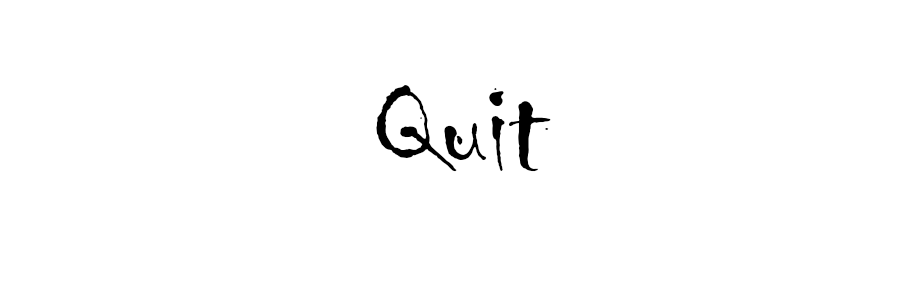
<style>
.page{position:relative;width:921px;height:285px;background:#ffffff}
.page>*{position:absolute;margin:0}
.t1{font:141.7px "Chiller-Regular";color:#000000}
</style>
<div class="page">
<p class="t1" style="left:376px;top:85px;width:175px;height:87px">Quit</p>
</div>
